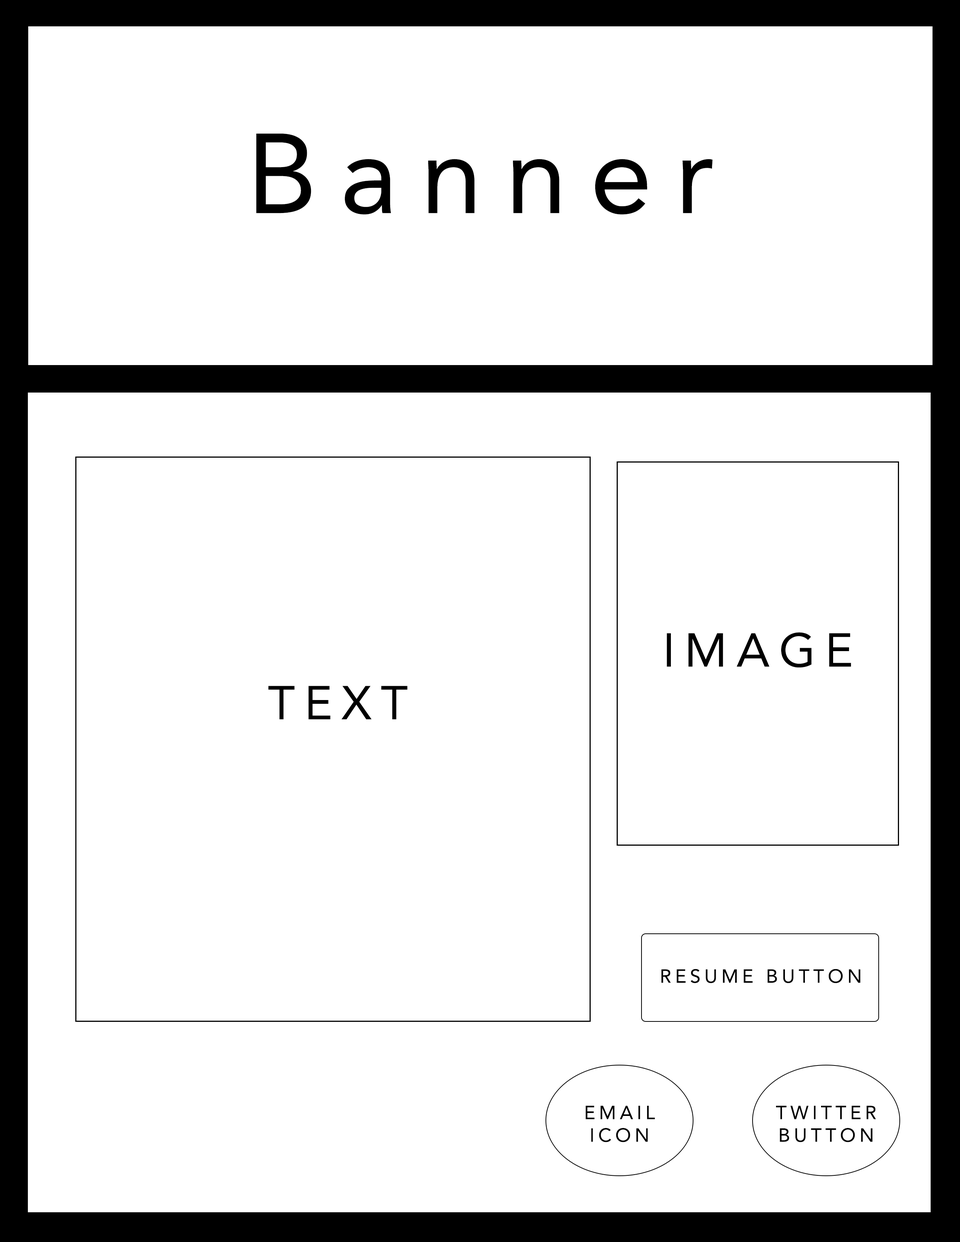
<style>
.page{position:relative;width:960px;height:1242px;background:#ffffff}
.page>*{position:absolute;margin:0}
.t1{font:112.2px "Avenir-Roman";letter-spacing:0.2em;color:#000000}
.t2{font:47.1px "Avenir-Roman";letter-spacing:0.2em;color:#000000}
.t3{font:18.8px "Avenir-Roman";letter-spacing:0.2em;color:#000000}
.t4{font:4.5px "Avenir-Roman";letter-spacing:0.2em;color:#000000}
</style>
<div class="page">
<p class="t1" style="left:256px;top:134px;width:457px;height:81px">Banner</p>
<p class="t2" style="left:667px;top:632px;width:184px;height:36px">IMAGE</p>
<p class="t2" style="left:268px;top:686px;width:139px;height:34px">TEXT</p>
<p class="t3" style="left:661px;top:969px;width:200px;height:14px">RESUME BUTTON</p>
<p class="t3" style="left:585px;top:1106px;width:70px;height:36px;text-align:center">EMAIL ICON</p>
<p class="t4" style="left:776px;top:1106px;width:100px;height:36px;text-align:center">TWITTER<br>BUTTON</p>
</div>
